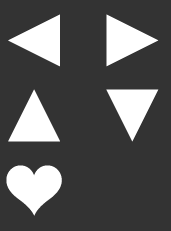
<style>
.page{position:relative;width:171px;height:231px;background:#333333}
.page>*{position:absolute;margin:0}
.t1{font:109.5px/75.1px "Champagne&Limousines";color:#ffffff}
</style>
<div class="page">
<p class="t1" style="left:6px;top:14px;width:153px;height:202px">◄► <br>▲▼<br>♥</p>
</div>
